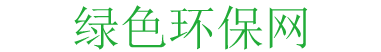
<style>
.page{position:relative;width:381px;height:52px;background:#ffffff}
.page>*{position:absolute;margin:0}
.t1{font:48px "SimSun";color:#22ac38}
</style>
<div class="page">
<p class="t1" style="left:74px;top:5px;width:234px;height:45px">绿色环保网</p>
</div>
